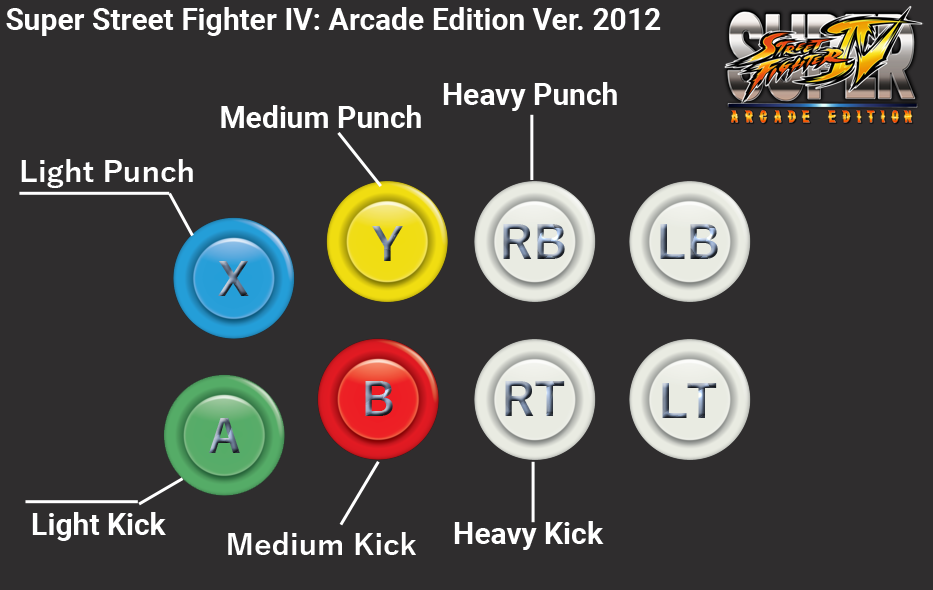
<style>
.page{position:relative;width:933px;height:590px;background:#2f2d2e}
.page>*{position:absolute;margin:0}
.t1{font:30px "Roboto-Bold";color:#ffffff}
.t2{font:30px "YuGothic-Bold";color:#ffffff}
</style>
<div class="page">
<p class="t1" style="left:6px;top:7px;width:655px;height:29px">Super Street Fighter IV: Arcade Edition Ver. 2012</p>
<p class="t1" style="left:443px;top:82px;width:174px;height:29px">Heavy Punch</p>
<p class="t1" style="left:221px;top:105px;width:200px;height:23px">Medium Punch</p>
<p class="t2" style="left:21px;top:159px;width:172px;height:29px">Light Punch</p>
<p class="t1" style="left:32px;top:512px;width:134px;height:29px">Light Kick</p>
<p class="t1" style="left:454px;top:521px;width:150px;height:29px">Heavy Kick</p>
<p class="t2" style="left:228px;top:532px;width:188px;height:23px">Medium Kick</p>
</div>
